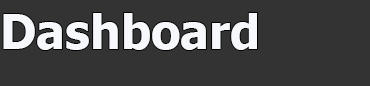
<style>
.page{position:relative;width:370px;height:86px;background:#333333}
.page>*{position:absolute;margin:0}
.t1{font:48px "Tahoma-Bold";color:#f6f8fb}
</style>
<div class="page">
<p class="t1" style="left:3px;top:13px;width:254px;height:37px">Dashboard</p>
</div>
